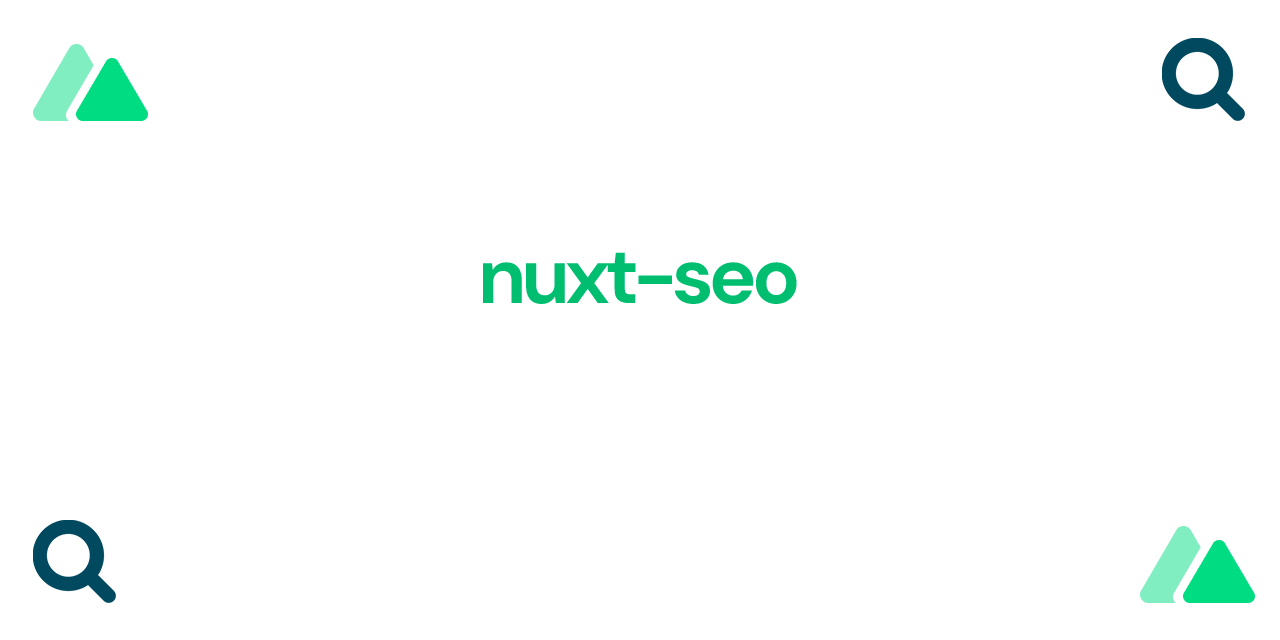
<style>
.page{position:relative;width:1280px;height:640px;background:#ffffff}
.page>*{position:absolute;margin:0}
.t1{font:80px "DMSans-Bold";letter-spacing:-0.06em;color:#00be70}
</style>
<div class="page">
<p class="t1" style="left:483px;top:252px;width:314px;height:52px">nuxt-seo</p>
</div>
